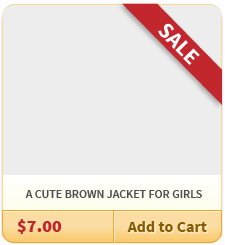
<style>
.page{position:relative;width:225px;height:245px;background:#ededed}
.page>*{position:absolute;margin:0}
.t1{font:12px "SourceSansPro-Semibold";color:#4d4d4d}
.t2{font:18px "SourceSansPro-Black";color:#c1272d}
.t3{font:16px "SourceSansPro-Bold";color:#8a5c00}
</style>
<div class="page">
<p class="t1" style="left:25px;top:190px;width:177px;height:8px">A CUTE BROWN JACKET FOR GIRLS</p>
<p class="t2" style="left:17px;top:219px;width:45px;height:15px">$7.00</p>
<p class="t3" style="left:127px;top:221px;width:80px;height:11px">Add to Cart</p>
</div>
